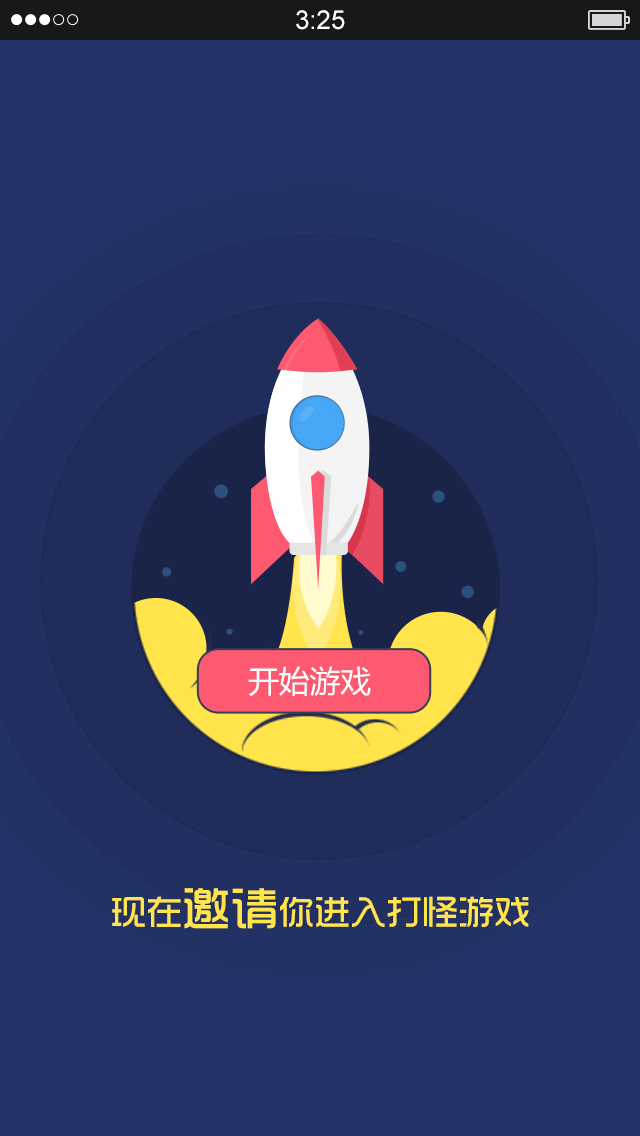
<style>
.page{position:relative;width:640px;height:1136px;background:#243367}
.page>*{position:absolute;margin:0}
.t1{font:26px "ArialMT";color:#ffffff}
.t2{font:30.7px "MicrosoftYaHei";color:#ffffff}
.t3{font:36px "TRENDS";color:#ffe44c;text-transform:uppercase}
.t4{font:48px "TRENDS";color:#ffe44c;text-transform:uppercase}
</style>
<div class="page">
<p class="t1" style="left:296px;top:10px;width:49px;height:20px">3:25</p>
<p class="t2" style="left:248px;top:666px;width:123px;height:31px">开始游戏</p>
<p class="t3" style="left:112px;top:888px;width:417px;height:41px">现在<span class="t4">邀请</span>你进入打怪游戏</p>
</div>
